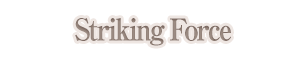
<style>
.page{position:relative;width:306px;height:58px;background:#ffffff}
.page>*{position:absolute;margin:0}
.t1{font:30px "RyuminPro-ExBold";letter-spacing:-0.08em;color:#9c8c83;scale:0.9 1}
</style>
<div class="page">
<p class="t1" style="left:75px;top:18px;width:156px;height:28px">Striking Force</p>
</div>
